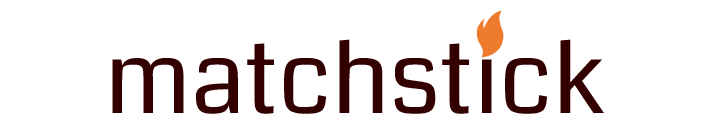
<style>
.page{position:relative;width:710px;height:132px;background:#ffffff}
.page>*{position:absolute;margin:0}
.t1{font:100px "Coda-Regular";color:#330000}
</style>
<div class="page">
<p class="t1" style="left:112px;top:38px;width:492px;height:76px">matchstick</p>
</div>
